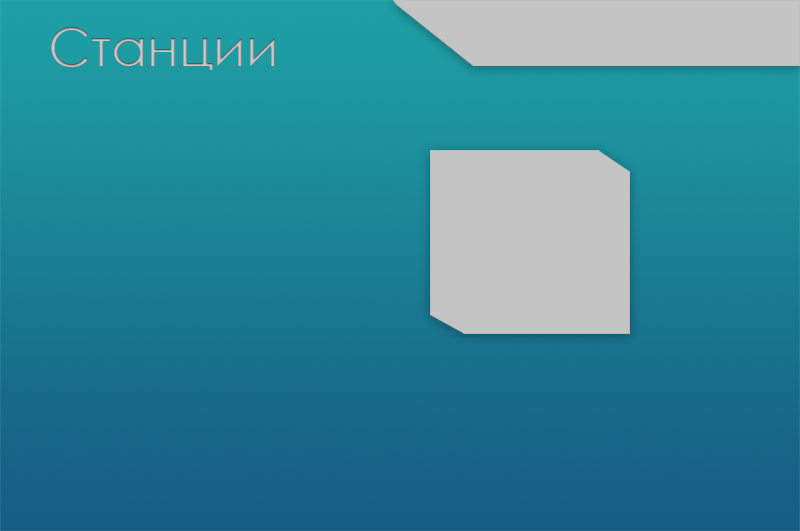
<style>
.page{position:relative;width:800px;height:531px}
.page>*{position:absolute;margin:0}
.t1{font:53.5px "CenturyGothic"}
</style>
<div class="page">
<p class="t1" style="left:51px;top:27px;width:224px;height:43px">Станции</p>
</div>
